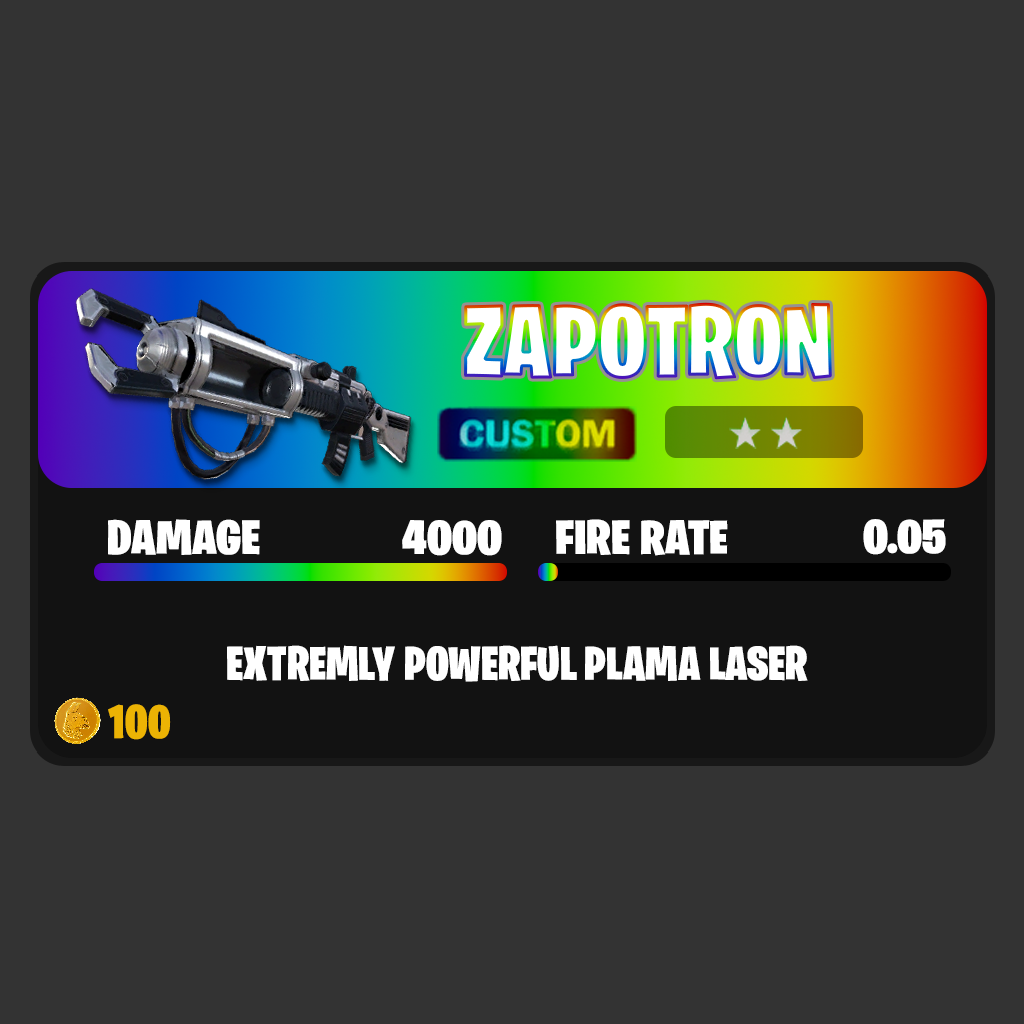
<style>
.page{position:relative;width:1024px;height:1024px;background:#333333}
.page>*{position:absolute;margin:0}
.t1{font:100.8px "BurbankBigCondensed-Black";color:#ffffff}
.t2{font:48.4px "BurbankBigCondensed-Black";color:#ffffff;scale:1.1 1}
.t3{font:48.3px "BurbankBigCondensed-Black";color:#ffffff;scale:1.1 1}
.t4{font:48px "BurbankBigCondensed-Black";color:#ffffff}
.t5{font:48px "BurbankBigCondensed-Black";color:#ecb304}
</style>
<div class="page">
<p class="t1" style="left:465px;top:303px;width:366px;height:76px">ZAPOTRON</p>
<p class="t2" style="left:108px;top:519px;width:152px;height:36px">DAMAGE</p>
<p class="t2" style="left:402px;top:520px;width:100px;height:36px">4000</p>
<p class="t3" style="left:556px;top:519px;width:172px;height:37px">FIRE RATE</p>
<p class="t3" style="left:863px;top:519px;width:83px;height:36px">0.05</p>
<p class="t4" style="left:227px;top:645px;width:581px;height:37px">EXTREMLY POWERFUL PLAMA LASER</p>
<p class="t5" style="left:108px;top:704px;width:63px;height:36px">100</p>
</div>
